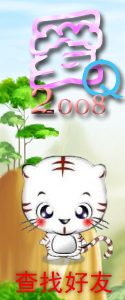
<style>
.page{position:relative;width:125px;height:300px}
.page>*{position:absolute;margin:0}
.t1{font:77px "STCaiyun";font-weight:bold}
.t2{font:64.4px "FZSTK--GBK1-0";color:#3dc4f8}
.t3{font:27.2px "Georgia"}
.t4{font:49.7px "Georgia"}
.t5{font:24.8px "SimHei";color:#ff0000}
</style>
<div class="page">
<p class="t1" style="left:29px;top:9px;width:74px;height:81px;rotate:-6deg">爱</p>
<p class="t2" style="left:82px;top:59px;width:42px;height:40px">Q</p>
<p class="t3" style="left:31px;top:87px;width:75px;height:28px"><span class="t4">2</span>008</p>
<p class="t5" style="left:15px;top:271px;width:97px;height:23px">查找好友</p>
</div>
